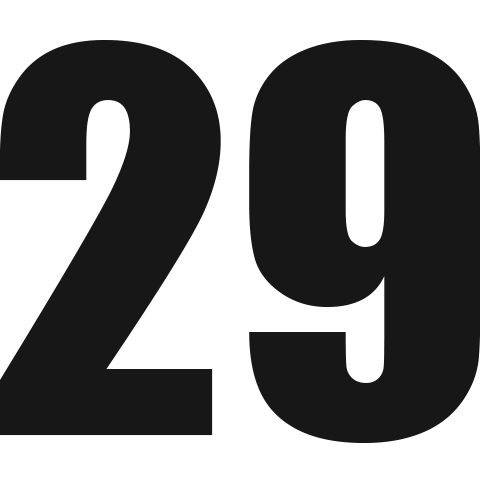
<style>
.page{position:relative;width:480px;height:480px;background:#171717}
.page>*{position:absolute;margin:0}
.t1{font:490.3px "Impact";color:#171717}
</style>
<div class="page">
<p class="t1" style="left:0px;top:40px;width:481px;height:403px">29</p>
</div>
